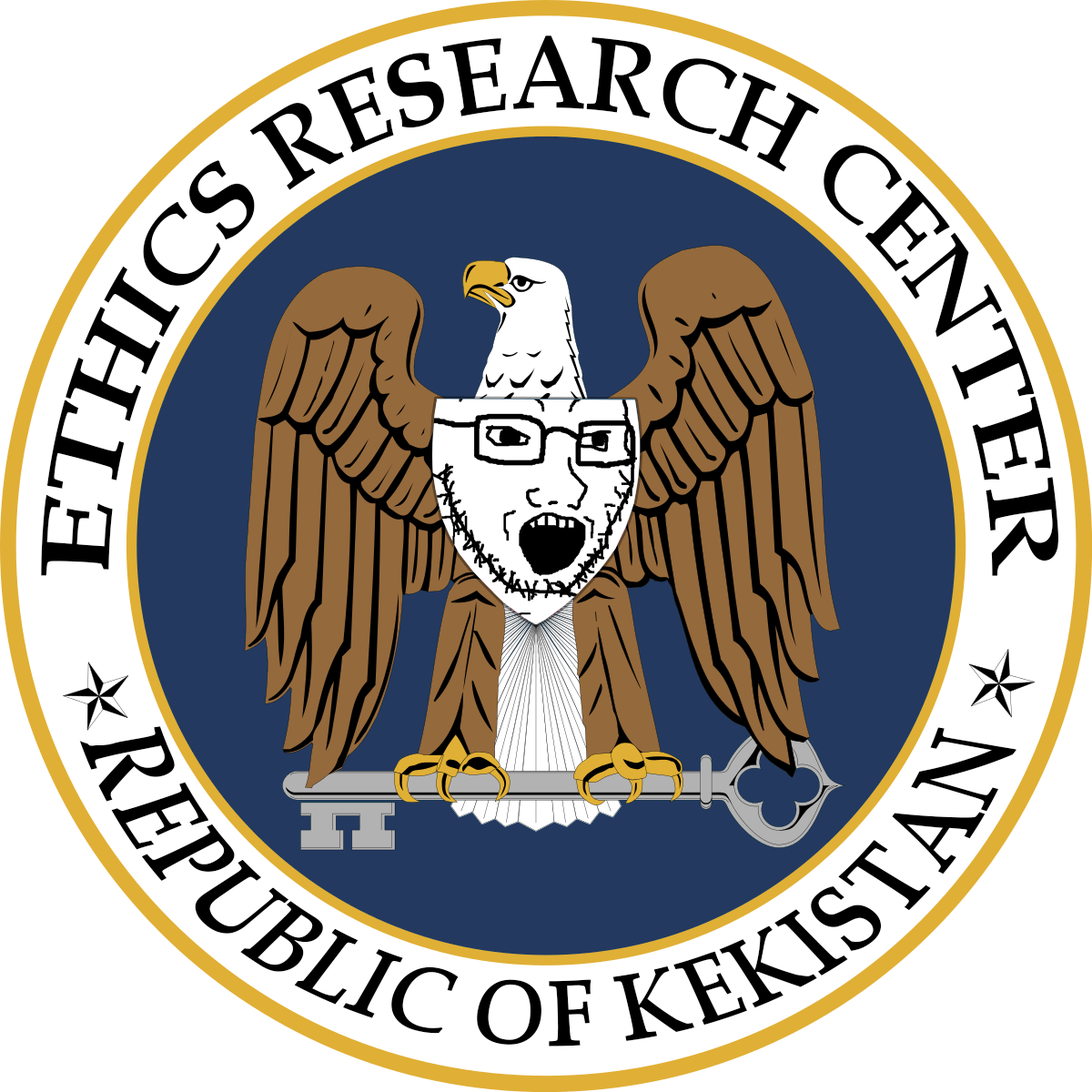
<style>
.page{position:relative;width:1092px;height:1092px;background:#ffffff}
.page>*{position:absolute;margin:0}
.t1{font:65px "BookAntiqua-Bold";color:#000000;scale:0.94 1}
.t2{font:57.5px "BookAntiqua-Bold";color:#000000;scale:1.12 1}
</style>
<div class="page">
<p class="t1" style="left:41px;top:35px;width:1017px;height:541px">ETHICS RESEARCH CENTER</p>
<p class="t2" style="left:78px;top:726px;width:938px;height:320px">REPUBLIC OF KEKISTAN</p>
</div>
